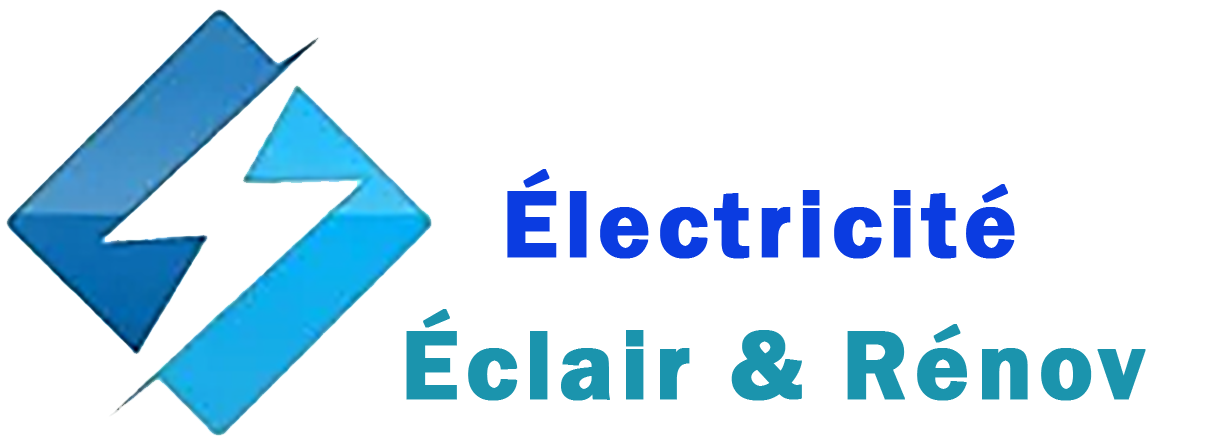
<style>
.page{position:relative;width:1208px;height:446px;background:#ffffff}
.page>*{position:absolute;margin:0}
.t1{font:97.4px "FranklinGothic-Demi";letter-spacing:0.05em;color:#0b3ce1;font-weight:bold}
.t2{font:100px "FranklinGothic-Demi";letter-spacing:0.05em;color:#1b94ad;font-weight:bold}
</style>
<div class="page">
<p class="t1" style="left:507px;top:169px;width:508px;height:90px">Électricité</p>
<p class="t2" style="left:406px;top:309px;width:740px;height:92px">Éclair &amp; Rénov</p>
</div>
